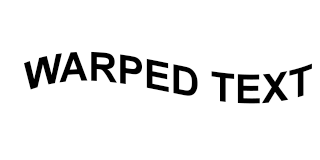
<style>
.page{position:relative;width:320px;height:160px;background:#ffffff}
.page>*{position:absolute;margin:0}
.t1{font:40px "Arial-BoldMT";color:#000000}
</style>
<div class="page">
<p class="t1" style="left:24px;top:51px;width:288px;height:53px">WARPED TEXT</p>
</div>
